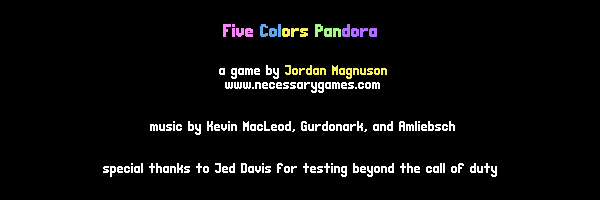
<style>
.page{position:relative;width:600px;height:200px;background:#000000}
.page>*{position:absolute;margin:0}
.t1{font:10px "CasualEncounter";color:#f989fa}
.t2{font:10px "CasualEncounter";color:#65a7eb}
.t3{font:10px "CasualEncounter";color:#f8f256}
.t4{font:10px "CasualEncounter";color:#a3fa89}
.t5{font:10px "CasualEncounter";color:#b06fff}
.t6{font:8px/14px "CasualEncounter";color:#ffffff}
.t7{font:8px/14px "CasualEncounter";color:#f8f256}
</style>
<div class="page">
<p class="t1" style="left:223px;top:24px;width:154px;height:13px">Five<span class="t2"> Col</span><span class="t3">ors </span><span class="t4">Pan</span><span class="t5">dora</span></p>
<p class="t6" style="left:103px;top:65px;width:394px;height:112px;text-align:center">a game by <span class="t7">Jordan Magnuson<br></span>www.necessarygames.com<br><br><br>music by Kevin MacLeod, Gurdonark, and Amliebsch<br><br><br>special thanks to Jed Davis for testing beyond the call of duty</p>
</div>
